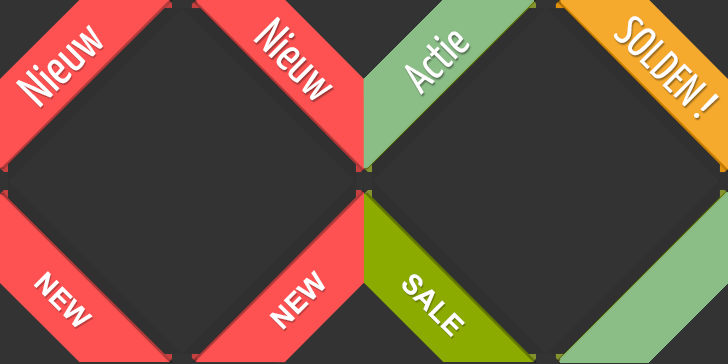
<style>
.page{position:relative;width:728px;height:364px;background:#333333}
.page>*{position:absolute;margin:0}
.t1{font:48.3px "YanoneKaffeesatz-Regular";color:#ffffff}
.t2{font:44.3px "YanoneKaffeesatz-Regular";letter-spacing:0.02em;color:#ffffff}
.t3{font:45px "YanoneKaffeesatz-Regular";color:#ffffff}
</style>
<div class="page">
<p class="t1" style="left:253px;top:16px;width:80px;height:85px;rotate:45deg">Nieuw</p>
<p class="t2" style="left:614px;top:16px;width:105px;height:102px;rotate:45deg">SOLDEN !</p>
<p class="t3" style="left:404px;top:31px;width:66px;height:64px;rotate:-45deg">Actie</p>
</div>
